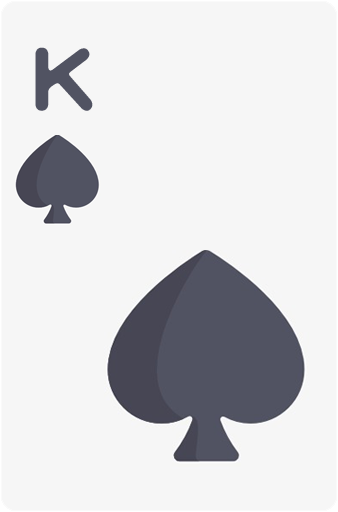
<style>
.page{position:relative;width:338px;height:512px;background:#f6f6f6}
.page>*{position:absolute;margin:0}
.t1{font:72px "JPTY";letter-spacing:0.075em;color:#515362}
</style>
<div class="page">
<p class="t1" style="left:35px;top:47px;width:58px;height:64px">K</p>
</div>
